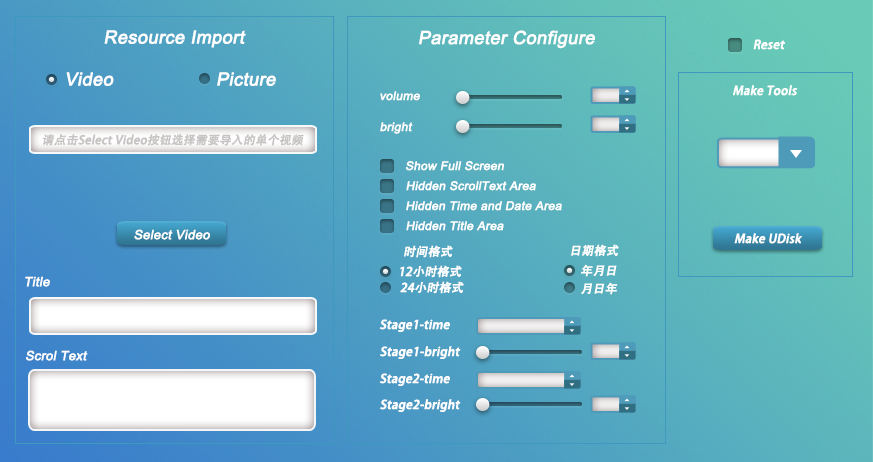
<style>
.page{position:relative;width:873px;height:462px}
.page>*{position:absolute;margin:0}
.t1{font:18px "ArialMT";color:#ffffff;font-weight:bold;font-style:italic}
.t2{font:11.9px "AdobeHeitiStd-Regular";color:#ffffff;font-weight:bold;font-style:italic}
.t3{font:11.9px "ArialMT";color:#ffffff;font-weight:bold;font-style:italic}
.t4{font:11.7px "AdobeHeitiStd-Regular";color:#c8c4c4;font-weight:bold;font-style:italic}
.t5{font:12.8px "ArialMT";color:#ffffff;font-weight:bold;font-style:italic}
</style>
<div class="page">
<p class="t1" style="left:104px;top:30px;width:142px;height:18px">Resource Import</p>
<p class="t1" style="left:419px;top:30px;width:176px;height:19px">Parameter Configure</p>
<p class="t2" style="left:753px;top:39px;width:32px;height:11px">Reset</p>
<p class="t1" style="left:66px;top:72px;width:48px;height:14px">Video</p>
<p class="t1" style="left:217px;top:72px;width:59px;height:14px">Picture</p>
<p class="t2" style="left:733px;top:85px;width:65px;height:11px">Make Tools</p>
<p class="t3" style="left:380px;top:91px;width:40px;height:10px">volume</p>
<p class="t3" style="left:380px;top:122px;width:33px;height:12px">bright</p>
<p class="t4" style="left:43px;top:134px;width:261px;height:12px">请点击Select Video按钮选择需要导入的单个视频</p>
<p class="t3" style="left:406px;top:161px;width:98px;height:10px">Show Full Screen</p>
<p class="t3" style="left:406px;top:181px;width:130px;height:10px">Hidden ScrollText Area</p>
<p class="t3" style="left:406px;top:201px;width:156px;height:10px">Hidden Time and Date Area</p>
<p class="t3" style="left:406px;top:221px;width:98px;height:10px">Hidden Title Area</p>
<p class="t5" style="left:134px;top:229px;width:76px;height:11px">Select Video</p>
<p class="t2" style="left:734px;top:233px;width:68px;height:11px">Make UDisk</p>
<p class="t2" style="left:404px;top:245px;width:49px;height:13px">时间格式</p>
<p class="t2" style="left:571px;top:244px;width:48px;height:13px">日期格式</p>
<p class="t2" style="left:400px;top:265px;width:62px;height:13px">12小时格式</p>
<p class="t2" style="left:581px;top:264px;width:36px;height:13px">年月日</p>
<p class="t5" style="left:25px;top:276px;width:25px;height:11px">Title</p>
<p class="t2" style="left:400px;top:281px;width:64px;height:13px">24小时格式</p>
<p class="t2" style="left:581px;top:282px;width:37px;height:13px">月日年</p>
<p class="t2" style="left:379px;top:319px;width:71px;height:13px">Stage1-time</p>
<p class="t5" style="left:26px;top:350px;width:62px;height:11px">Scrol Text</p>
<p class="t2" style="left:380px;top:346px;width:81px;height:13px">Stage1-bright</p>
<p class="t2" style="left:379px;top:373px;width:71px;height:13px">Stage2-time</p>
<p class="t2" style="left:380px;top:399px;width:81px;height:13px">Stage2-bright</p>
</div>
